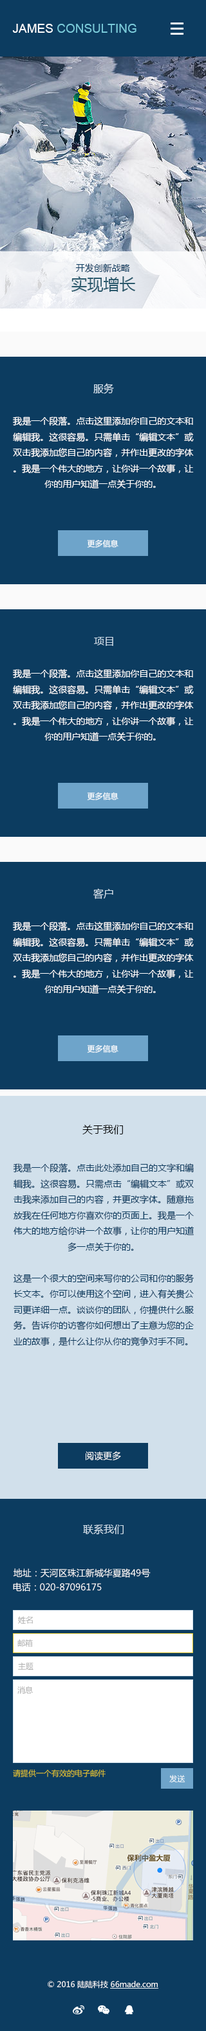
<style>
.page{position:relative;width:206px;height:2031px;background:#0c3c60}
.page>*{position:absolute;margin:0}
.t1{font:12.2px "ArialMT";color:#79cada}
.t2{font:12.2px "ArialMT";color:#ffffff}
.t3{font:9px "MicrosoftYaHei";color:#0c3c60}
.t4{font:16.1px "MicrosoftYaHei";color:#2b596c}
.t5{font:10.3px "MicrosoftYaHei";color:#d1e0eb}
.t6{font:9px "MicrosoftYaHei";color:#ffffff}
.t7{font:7.7px "MicrosoftYaHei";color:#ffffff}
.t8{font:10.3px "MicrosoftYaHei";color:#000000}
.t9{font:9px "MicrosoftYaHei";color:#feffff}
.t10{font:7.7px "MicrosoftYaHei";color:#acacac}
.t11{font:7.7px "MicrosoftYaHei";color:#dec328}
</style>
<div class="page">
<p class="t1" style="left:12px;top:24px;width:124px;height:9px"><span class="t2">JAMES </span>CONSULTING</p>
<p class="t3" style="left:75px;top:264px;width:55px;height:9px">开发创新战略</p>
<p class="t4" style="left:71px;top:276px;width:65px;height:16px">实现增长</p>
<p class="t5" style="left:93px;top:383px;width:21px;height:11px">服务</p>
<p class="t6" style="left:13px;top:417px;width:181px;height:72px;text-align:center">我是一个段落。点击这里添加你自己的文本和编辑我。这很容易。只需单击“编辑文本”或双击我添加您自己的内容，并作出更改的字体。我是一个伟大的地方，让你讲一个故事，让你的用户知道一点关于你的。</p>
<p class="t7" style="left:87px;top:539px;width:31px;height:9px">更多信息</p>
<p class="t5" style="left:94px;top:637px;width:19px;height:9px">项目</p>
<p class="t6" style="left:13px;top:669px;width:181px;height:72px;text-align:center">我是一个段落。点击这里添加你自己的文本和编辑我。这很容易。只需单击“编辑文本”或双击我添加您自己的内容，并作出更改的字体。我是一个伟大的地方，让你讲一个故事，让你的用户知道一点关于你的。</p>
<p class="t7" style="left:87px;top:792px;width:31px;height:8px">更多信息</p>
<p class="t5" style="left:93px;top:888px;width:20px;height:11px">客户</p>
<p class="t6" style="left:13px;top:922px;width:181px;height:72px;text-align:center">我是一个段落。点击这里添加你自己的文本和编辑我。这很容易。只需单击“编辑文本”或双击我添加您自己的内容，并作出更改的字体。我是一个伟大的地方，让你讲一个故事，让你的用户知道一点关于你的。</p>
<p class="t7" style="left:87px;top:1045px;width:31px;height:8px">更多信息</p>
<p class="t8" style="left:82px;top:1125px;width:41px;height:10px">关于我们</p>
<p class="t3" style="left:13px;top:1164px;width:181px;height:182px;text-align:center">我是一个段落。点击此处添加自己的文字和编辑我。这很容易。只需点击“编辑文本”或双击我来添加自己的内容，并更改字体。随意拖放我在任何地方你喜欢你的页面上。我是一个伟大的地方给你讲一个故事，让你的用户知道多一点关于你的。<br>​<br>这是一个很大的空间来写你的公司和你的服务长文本。你可以使用这个空间，进入有关贵公司更详细一点。谈谈你的团队，你提供什么服务。告诉你的访客你如何想出了主意为您的企业的故事，是什么让你从你的竞争对手不同。</p>
<p class="t9" style="left:86px;top:1452px;width:35px;height:9px">阅读更多</p>
<p class="t5" style="left:83px;top:1525px;width:40px;height:10px">联系我们</p>
<p class="t6" style="left:13px;top:1569px;width:137px;height:9px">地址：天河区珠江新城华夏路49号</p>
<p class="t6" style="left:13px;top:1583px;width:89px;height:9px">电话：020-87096175</p>
<p class="t10" style="left:18px;top:1616px;width:15px;height:9px">姓名</p>
<p class="t10" style="left:17px;top:1639px;width:16px;height:9px">邮箱</p>
<p class="t10" style="left:18px;top:1662px;width:15px;height:9px">主题</p>
<p class="t10" style="left:17px;top:1686px;width:16px;height:9px">消息</p>
<p class="t11" style="left:13px;top:1770px;width:92px;height:8px">请提供一个有效的电子邮件</p>
<p class="t7" style="left:169px;top:1775px;width:16px;height:8px">发送</p>
<p class="t7" style="left:48px;top:1981px;width:110px;height:8px">© 2016 陆陆科技 66made.com</p>
</div>
